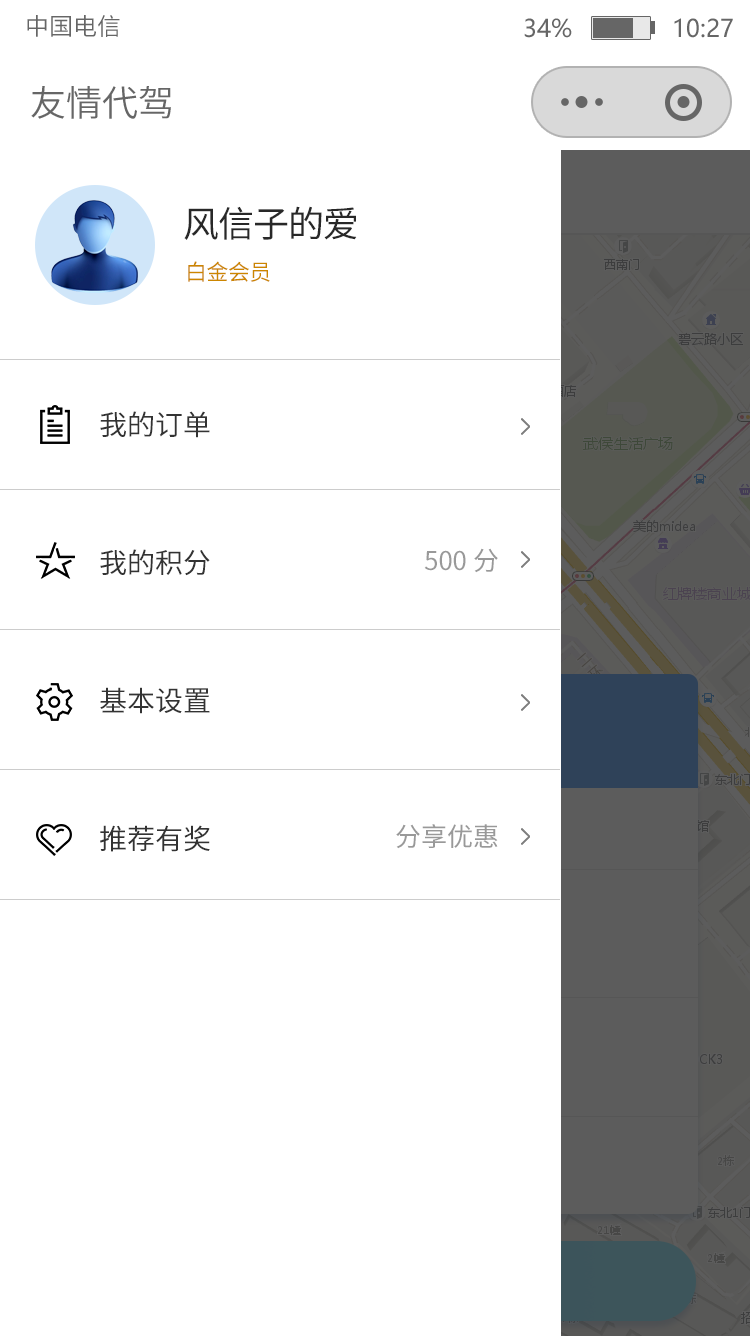
<style>
.page{position:relative;width:750px;height:1336px;background:#ffffff}
.page>*{position:absolute;margin:0}
.t1{font:24px "SourceHanSansCN-Normal";color:#666666}
.t2{font:24px "MicrosoftYaHei";color:#666666}
.t3{font:36px "SourceHanSansCN-Normal";color:#666666}
.t4{font:36px "SourceHanSansCN-Regular";letter-spacing:-0.025em;color:#282828}
.t5{font:22px "SourceHanSansCN-Regular";letter-spacing:-0.025em;color:#cc8600}
.t6{font:28px/46px "SourceHanSansCN-Regular";color:#333333}
.t7{font:26px/46px "SourceHanSansCN-Regular";color:#999999}
</style>
<div class="page">
<p class="t1" style="left:27px;top:15px;width:93px;height:22px">中国电信</p>
<p class="t2" style="left:524px;top:18px;width:209px;height:20px">34%              10:27</p>
<p class="t3" style="left:31px;top:86px;width:140px;height:33px">友情代驾</p>
<p class="t4" style="left:184px;top:206px;width:173px;height:34px">风信子的爱</p>
<p class="t5" style="left:188px;top:261px;width:82px;height:21px">白金会员</p>
<p class="t6" style="left:100px;top:411px;width:110px;height:441px">我的订单<br><br><br>我的积分<br><br><br>基本设置<br><br><br>推荐有奖</p>
<p class="t7" style="left:396px;top:548px;width:102px;height:301px;text-align:right">500 分<br><br><br><br><br><br>分享优惠</p>
</div>
